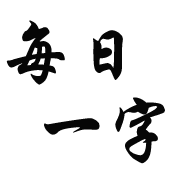
<style>
.page{position:relative;width:180px;height:180px;background:#ffffff}
.page>*{position:absolute;margin:0}
.t1{font:72px "STXingkai";color:#060606}
</style>
<div class="page">
<p class="t1" style="left:6px;top:20px;width:117px;height:65px">每日</p>
<p class="t1" style="left:44px;top:97px;width:121px;height:67px">一字</p>
</div>
